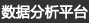
<style>
.page{position:relative;width:89px;height:23px;background:#333333}
.page>*{position:absolute;margin:0}
.t1{font:14px "MicrosoftYaHei";color:#ffffff;font-weight:bold}
</style>
<div class="page">
<p class="t1" style="left:1px;top:4px;width:87px;height:15px">数据分析平台</p>
</div>
